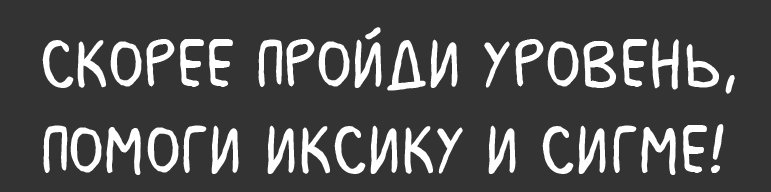
<style>
.page{position:relative;width:771px;height:192px;background:#333333}
.page>*{position:absolute;margin:0}
.t1{font:72px "MilkMustacheBB";color:#ffffff}
</style>
<div class="page">
<p class="t1" style="left:42px;top:27px;width:693px;height:148px">Скорее пройди уровень, <br>помоги Иксику и Сигме!</p>
</div>
